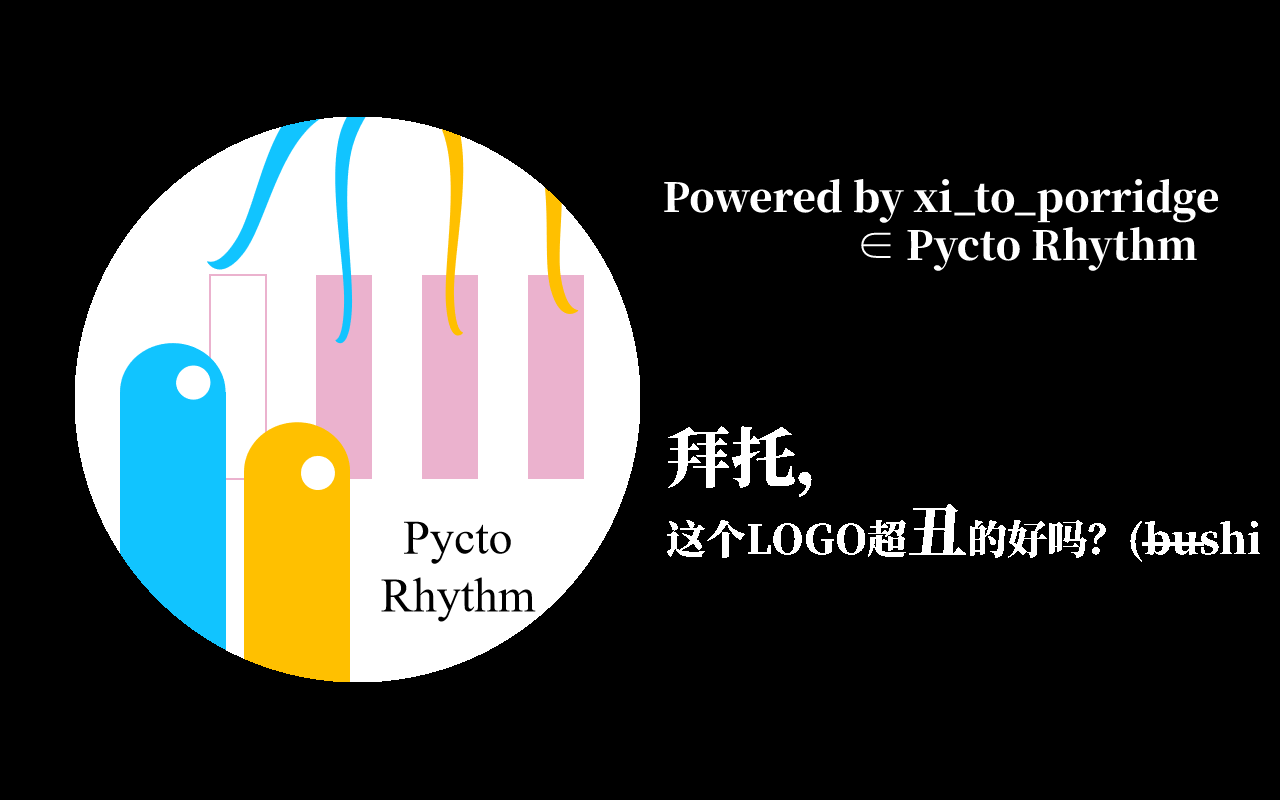
<style>
.page{position:relative;width:1280px;height:800px;background:#000000}
.page>*{position:absolute;margin:0}
.t1{font:40px "SourceHanSerifSC-Heavy";color:#ffffff}
.t2{font:65px "SourceHanSerifSC-Heavy";color:#ffffff}
.t3{font:60px "SourceHanSerifSC-Heavy";color:#ffffff}
</style>
<div class="page">
<p class="t1" style="left:664px;top:178px;width:555px;height:93px">Powered by xi_to_porridge <br>         ∈ Pycto Rhythm</p>
<p class="t1" style="left:666px;top:425px;width:595px;height:137px"><span class="t2">拜托，<br></span>这个LOGO超<span class="t3">丑</span>的好吗？(bushi</p>
</div>
